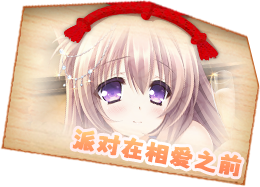
<style>
.page{position:relative;width:260px;height:187px;background:#ffffff}
.page>*{position:absolute;margin:0}
.t1{font:24px "MaokenAssortedSans";color:#ff9e66;font-weight:bold}
</style>
<div class="page">
<p class="t1" style="left:72px;top:128px;width:170px;height:49px;rotate:10deg">派对在相爱之前</p>
</div>
